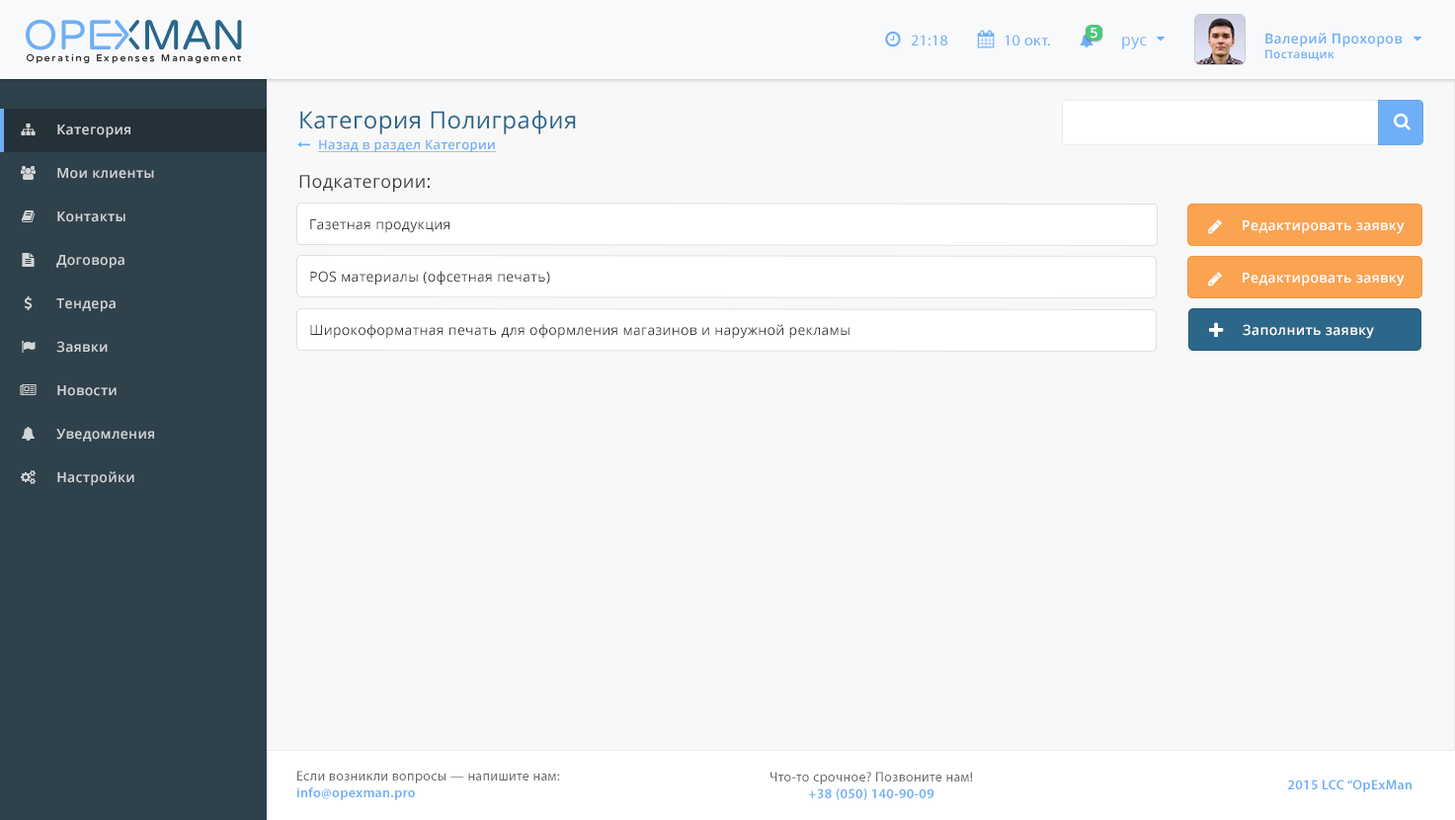
<style>
.page{position:relative;width:1455px;height:820px;background:#f8f8f8}
.page>*{position:absolute;margin:0}
.t1{font:13.8px "OpenSans-Semibold";letter-spacing:0.025em;color:#ffffff}
.t2{font:15.7px "MyriadPro-Regular";letter-spacing:0.025em;color:#6faff8}
.t3{font:15.7px "OpenSans";letter-spacing:0.025em;color:#6eaff8}
.t4{font:13.8px "OpenSans-Semibold";letter-spacing:0.025em;color:#6eaef7}
.t5{font:11.8px "OpenSans-Semibold";letter-spacing:0.025em;color:#6eaef7}
.t6{font:23.6px "OpenSans";letter-spacing:0.025em;color:#29658b}
.t7{font:13.8px "OpenSans-Semibold";letter-spacing:0.025em;color:#d2d5d7}
.t8{font:12.8px "OpenSans-Semibold";letter-spacing:0.025em;color:#6faff8;text-decoration:underline}
.t9{font:17.7px "OpenSans";letter-spacing:0.025em;color:#373838}
.t10{font:13.8px "OpenSans";letter-spacing:0.025em;color:#373838}
.t11{font:13.8px "MyriadPro-Regular";letter-spacing:0.025em;color:#696969}
.t12{font:13.8px "MyriadPro-Semibold";letter-spacing:0.025em;color:#6eaef8}
</style>
<div class="page">
<p class="t1" style="left:1090px;top:28px;width:7px;height:11px">5</p>
<p class="t2" style="left:911px;top:35px;width:37px;height:11px">21:18</p>
<p class="t2" style="left:1004px;top:35px;width:46px;height:11px">10 окт.</p>
<p class="t3" style="left:1122px;top:37px;width:25px;height:12px">рус</p>
<p class="t4" style="left:1265px;top:33px;width:137px;height:28px">Валерий Прохоров<br><span class="t5">Поставщик</span></p>
<p class="t6" style="left:300px;top:110px;width:276px;height:24px">Категория Полиграфия</p>
<p class="t7" style="left:57px;top:124px;width:73px;height:14px">Категория</p>
<p class="t8" style="left:318px;top:139px;width:179px;height:13px">Назад в раздел Категории</p>
<p class="t7" style="left:57px;top:168px;width:97px;height:11px">Мои клиенты</p>
<p class="t9" style="left:299px;top:175px;width:131px;height:18px">Подкатегории:</p>
<p class="t7" style="left:57px;top:211px;width:68px;height:11px">Контакты</p>
<p class="t10" style="left:310px;top:219px;width:139px;height:14px">Газетная продукция</p>
<p class="t1" style="left:1242px;top:220px;width:162px;height:14px">Редактировать заявку</p>
<p class="t7" style="left:56px;top:255px;width:68px;height:14px">Договора</p>
<p class="t10" style="left:310px;top:271px;width:240px;height:14px">POS материалы (офсетная печать)</p>
<p class="t1" style="left:1242px;top:273px;width:162px;height:13px">Редактировать заявку</p>
<p class="t7" style="left:56px;top:298px;width:60px;height:14px">Тендера</p>
<p class="t10" style="left:310px;top:324px;width:539px;height:15px">Широкоформатная печать для оформления магазинов и наружной рекламы</p>
<p class="t1" style="left:1242px;top:324px;width:132px;height:15px">Заполнить заявку</p>
<p class="t7" style="left:56px;top:341px;width:52px;height:12px">Заявки</p>
<p class="t7" style="left:57px;top:385px;width:60px;height:11px">Новости</p>
<p class="t7" style="left:56px;top:429px;width:98px;height:12px">Уведомления</p>
<p class="t7" style="left:57px;top:471px;width:77px;height:15px">Настройки</p>
<p class="t11" style="left:296px;top:770px;width:264px;height:30px">Если возникли вопросы — напишите нам:<br><span class="t12">info@opexman.pro</span></p>
<p class="t11" style="left:770px;top:771px;width:203px;height:29px;text-align:center">Что-то срочное? Позвоните нам!<br><span class="t12">+38 (050) 140-90-09</span></p>
<p class="t12" style="left:1288px;top:779px;width:123px;height:13px">2015 LCC “OpExMan</p>
</div>
